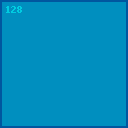
<style>
.page{position:relative;width:128px;height:128px;background:#008fbf}
.page>*{position:absolute;margin:0}
.t1{font:9px "Verdana-Bold";letter-spacing:-0.025em;color:#00cce1;text-transform:uppercase}
</style>
<div class="page">
<p class="t1" style="left:6px;top:6px;width:16px;height:7px">128</p>
</div>
